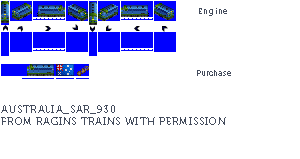
<style>
.page{position:relative;width:300px;height:159px;background:#ffffff}
.page>*{position:absolute;margin:0}
.t1{font:8px "Museo700-Regular";letter-spacing:0.075em;color:#444c5c}
.t2{font:8px "Museo700-Regular";color:#444c5c}
.t3{font:10px "Museo700-Regular";letter-spacing:0.075em;color:#444c5c;text-transform:uppercase}
</style>
<div class="page">
<p class="t1" style="left:199px;top:8px;width:28px;height:8px">Engine</p>
<p class="t2" style="left:197px;top:70px;width:34px;height:6px">Purchase</p>
<p class="t3" style="left:1px;top:105px;width:225px;height:20px">Australia_SAR_930<br>from ragins trains with permission</p>
</div>
